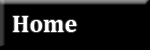
<style>
.page{position:relative;width:150px;height:50px;background:#000000}
.page>*{position:absolute;margin:0}
.t1{font:24px "Cambria-Bold";color:#ffffff}
</style>
<div class="page">
<p class="t1" style="left:13px;top:16px;width:64px;height:16px">Home</p>
</div>
